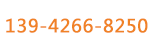
<style>
.page{position:relative;width:155px;height:45px;background:#ffffff}
.page>*{position:absolute;margin:0}
.t1{font:18px "MicrosoftYaHei";letter-spacing:0.025em;color:#f08226;font-weight:bold}
</style>
<div class="page">
<p class="t1" style="left:6px;top:18px;width:142px;height:15px">139-4266-8250</p>
</div>
